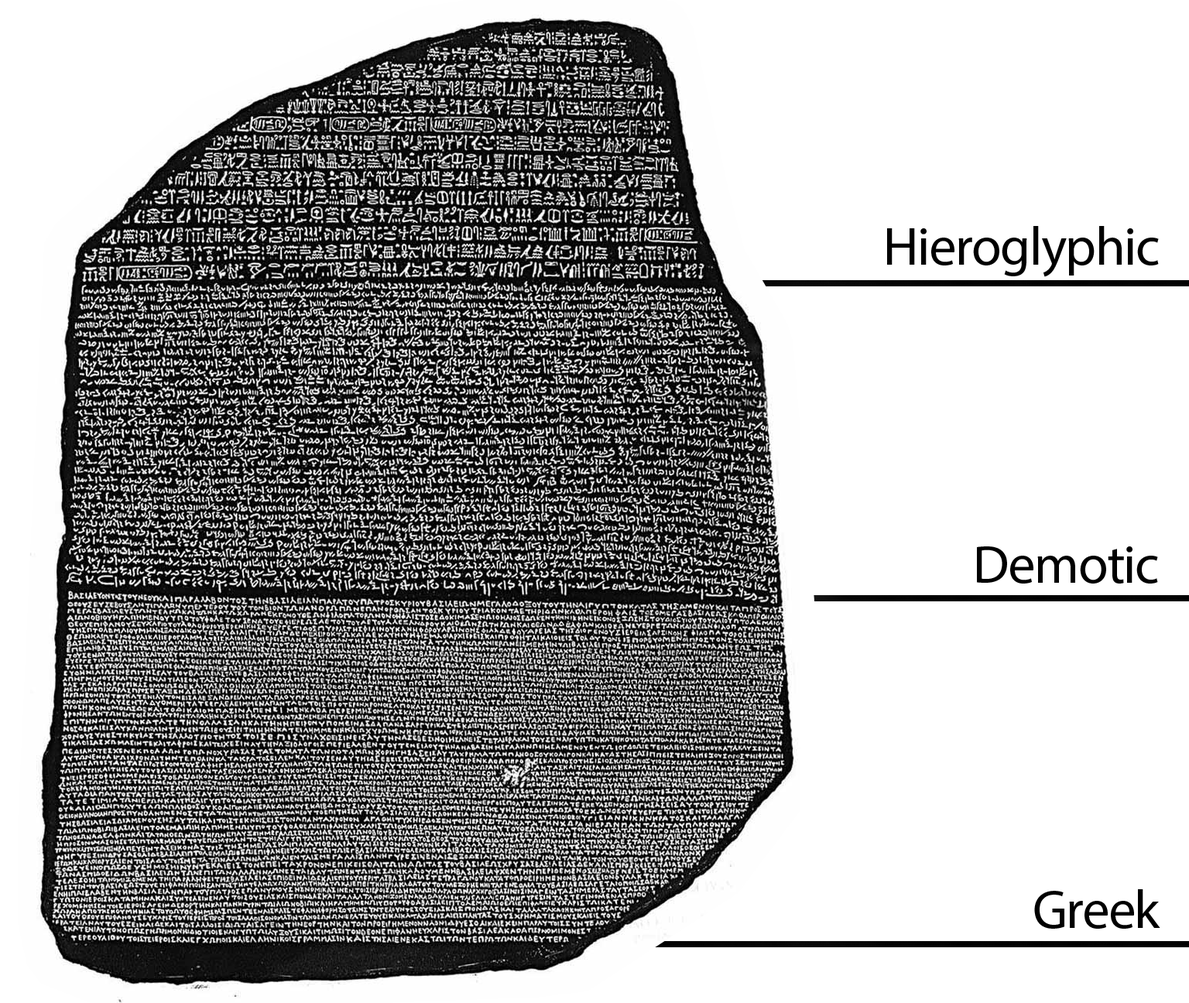
<style>
.page{position:relative;width:1189px;height:1003px;background:#ffffff}
.page>*{position:absolute;margin:0}
.t1{font:54.2px "MyriadPro-Regular";letter-spacing:-0.02em;color:#000000}
</style>
<div class="page">
<p class="t1" style="left:887px;top:226px;width:272px;height:51px">Hieroglyphic</p>
<p class="t1" style="left:977px;top:546px;width:181px;height:38px">Demotic</p>
<p class="t1" style="left:1034px;top:889px;width:126px;height:40px">Greek</p>
</div>
